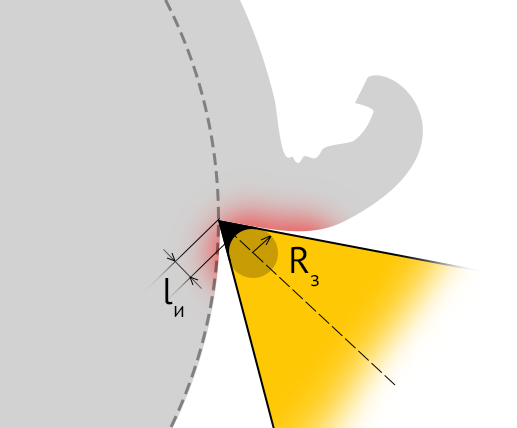
<style>
.page{position:relative;width:517px;height:428px;background:#d2d2d2}
.page>*{position:absolute;margin:0}
.t1{font:37.4px "PTSans-Regular";color:#000000}
</style>
<div class="page">
<p class="t1" style="left:291px;top:246px;width:28px;height:41px">Rз</p>
<p class="t1" style="left:165px;top:278px;width:19px;height:39px">lи</p>
</div>
